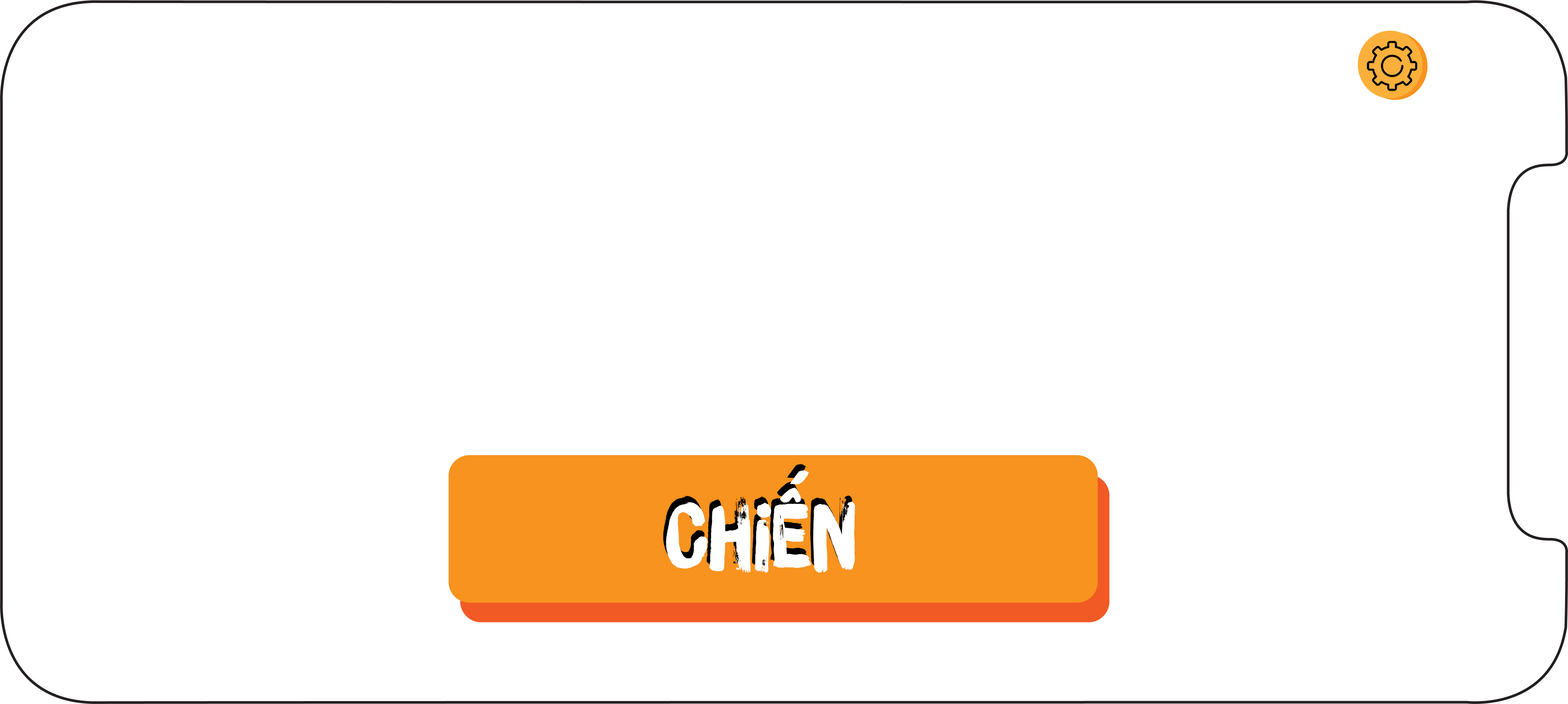
<style>
.page{position:relative;width:1568px;height:704px;background:#ffffff}
.page>*{position:absolute;margin:0}
.t1{font:88.7px "iCielBrushUp"}
.t2{font:88.7px "iCielBrushUp";color:#ffffff}
</style>
<div class="page">
<p class="t1" style="left:663px;top:464px;width:189px;height:103px">Chiến</p>
<p class="t2" style="left:666px;top:470px;width:189px;height:103px">Chiến</p>
</div>
